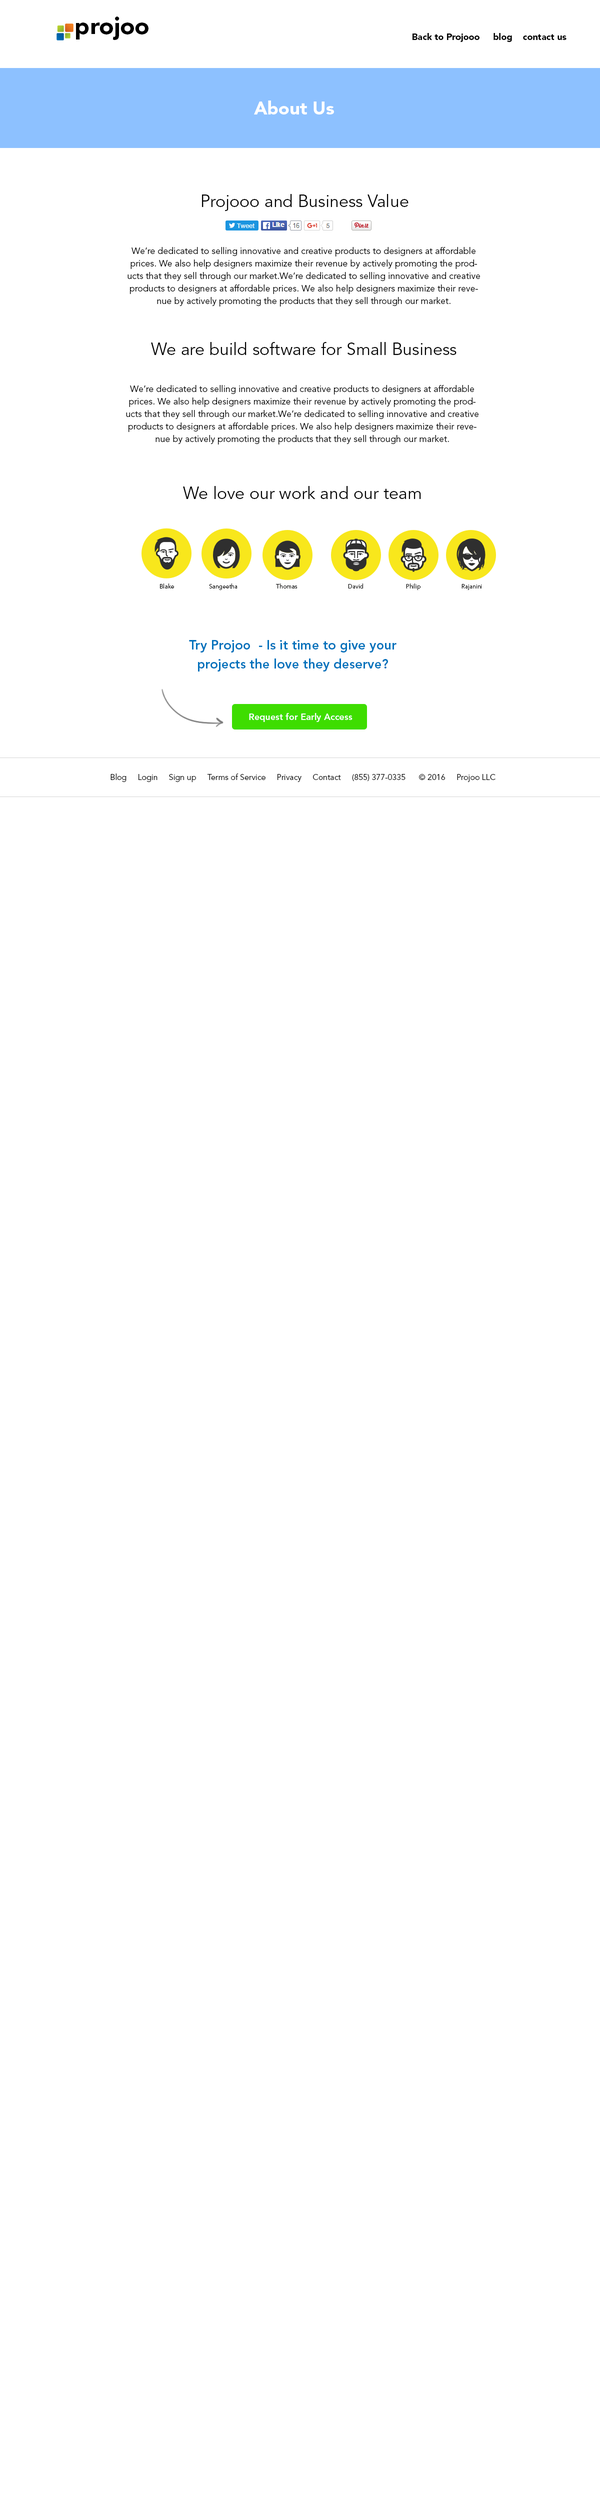
<style>
.page{position:relative;width:600px;height:2500px;background:#ffffff}
.page>*{position:absolute;margin:0}
.t1{font:24px "AvenirLTStd-Black";color:#000000}
.t2{font:9px "AvenirLTStd-Black";color:#000000}
.t3{font:18px "AvenirLTStd-Black";color:#ffffff}
.t4{font:17px "AvenirLTStd-Book";color:#000000}
.t5{font:9px/12.5px "AvenirLTStd-Book";color:#000000}
.t6{font:6px "AvenirLTStd-Book";color:#000000}
.t7{font:13px/19px "AvenirLTStd-Heavy";color:#0072bc}
.t8{font:9px "AvenirLTStd-Heavy";color:#ffffff}
.t9{font:8px "AvenirLTStd-Book";color:#000000}
</style>
<div class="page">
<p class="t1" style="left:76px;top:17px;width:73px;height:23px">projoo</p>
<p class="t2" style="left:413px;top:33px;width:154px;height:9px">Back to Projooo     blog    contact us</p>
<p class="t3" style="left:254px;top:101px;width:80px;height:14px">About Us</p>
<p class="t4" style="left:202px;top:194px;width:207px;height:17px">Projooo and Business Value</p>
<p class="t5" style="left:128px;top:247px;width:352px;height:60px;text-align:center">We’re dedicated to selling innovative and creative products to designers at affordable prices. We also help designers maximize their revenue by actively promoting the products that they sell through our market.We’re dedicated to selling innovative and creative products to designers at affordable prices. We also help designers maximize their revenue by actively promoting the products that they sell through our market.</p>
<p class="t4" style="left:151px;top:342px;width:306px;height:13px">We are build software for Small Business</p>
<p class="t5" style="left:126px;top:385px;width:353px;height:60px;text-align:center">We’re dedicated to selling innovative and creative products to designers at affordable prices. We also help designers maximize their revenue by actively promoting the products that they sell through our market.We’re dedicated to selling innovative and creative products to designers at affordable prices. We also help designers maximize their revenue by actively promoting the products that they sell through our market.</p>
<p class="t4" style="left:183px;top:486px;width:238px;height:13px">We love our work and our team</p>
<p class="t6" style="left:160px;top:584px;width:14px;height:5px">Blake</p>
<p class="t6" style="left:209px;top:584px;width:29px;height:6px">Sangeetha</p>
<p class="t6" style="left:276px;top:584px;width:22px;height:5px">Thomas</p>
<p class="t6" style="left:348px;top:584px;width:15px;height:5px">David</p>
<p class="t6" style="left:406px;top:584px;width:15px;height:7px">Philip</p>
<p class="t6" style="left:462px;top:584px;width:20px;height:6px">Rajanini</p>
<p class="t7" style="left:189px;top:640px;width:208px;height:32px;text-align:center">Try Projoo  - Is it time to give your <br>projects the love they deserve?</p>
<p class="t8" style="left:249px;top:713px;width:104px;height:9px">Request for Early Access</p>
<p class="t9" style="left:111px;top:774px;width:385px;height:9px">Blog     Login     Sign up     Terms of Service     Privacy     Contact     (855) 377-0335      © 2016     Projoo LLC</p>
</div>
